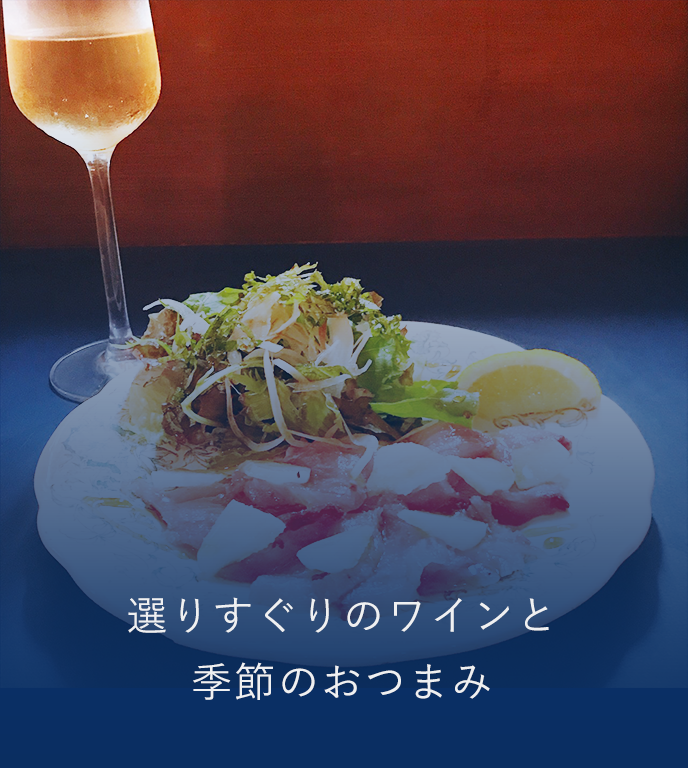
<style>
.page{position:relative;width:688px;height:768px}
.page>*{position:absolute;margin:0}
.t1{font:41.3px/66.1px "YuGo-Medium";letter-spacing:0.05em;color:#eff0f1}
</style>
<div class="page">
<p class="t1" style="left:128px;top:597px;width:421px;height:103px;text-align:center">選りすぐりのワインと<br>季節のおつまみ</p>
</div>
